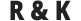
<style>
.page{position:relative;width:81px;height:21px;background:#ffffff}
.page>*{position:absolute;margin:0}
.t1{font:27px "NotoSans-Black";color:#222222;scale:0.85 1}
</style>
<div class="page">
<p class="t1" style="left:10px;top:0px;width:61px;height:21px">R &amp; K</p>
</div>
